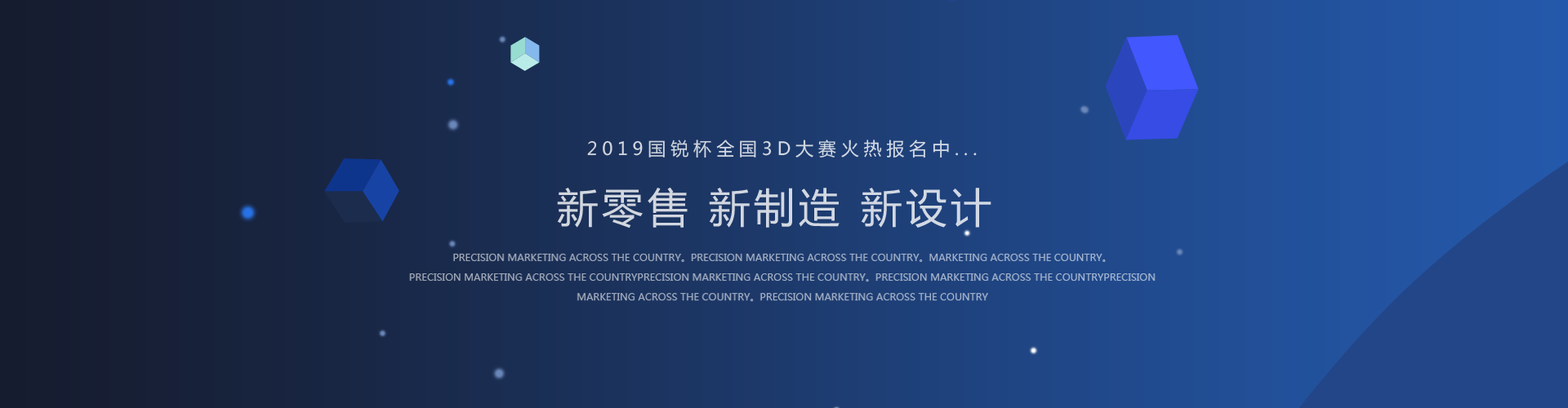
<style>
.page{position:relative;width:1568px;height:408px}
.page>*{position:absolute;margin:0}
.t1{font:18.1px "MicrosoftYaHei";letter-spacing:0.26em;color:#d2d7e1;text-transform:uppercase}
.t2{font:41.1px "MicrosoftYaHei";letter-spacing:0.1em;color:#d2d7e1}
.t3{font:9.9px/19.7px "MicrosoftYaHei";color:#a4afc4;text-transform:uppercase}
</style>
<div class="page">
<p class="t1" style="left:587px;top:140px;width:390px;height:18px">2019国锐杯全国3D大赛火热报名中...</p>
<p class="t2" style="left:557px;top:187px;width:434px;height:42px">新零售 新制造 新设计</p>
<p class="t3" style="left:409px;top:253px;width:747px;height:49px;text-align:center">Precision marketing across the country。Precision marketing across the country。marketing across the country。<br>Precision marketing across the countryPrecision marketing across the country。Precision marketing across the countryPrecision marketing across the country。Precision marketing across the country</p>
</div>
